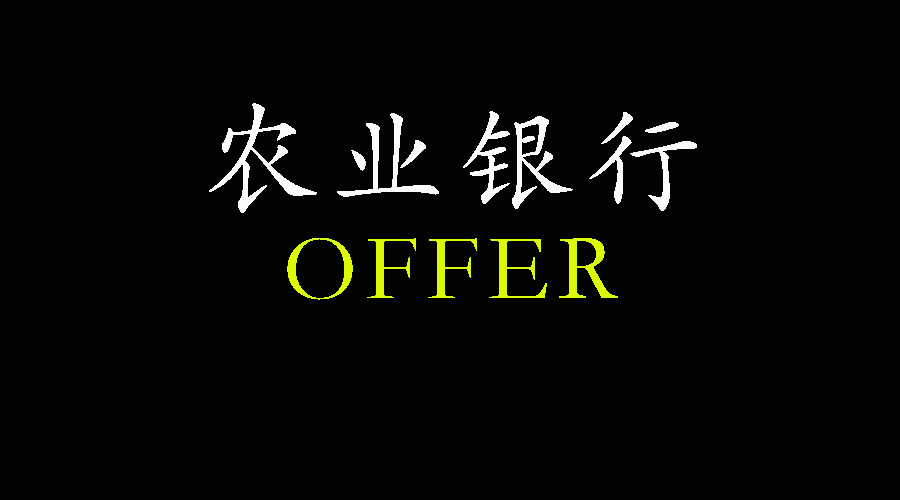
<style>
.page{position:relative;width:900px;height:500px;background:#030303}
.page>*{position:absolute;margin:0}
.t1{font:119px "STKaiti";letter-spacing:0.08em;color:#fbfbf9}
.t2{font:95px "STKaiti";letter-spacing:0.08em;color:#dafa06}
</style>
<div class="page">
<p class="t1" style="left:209px;top:103px;width:488px;height:110px">农业银行</p>
<p class="t2" style="left:287px;top:238px;width:331px;height:62px">OFFER</p>
</div>
